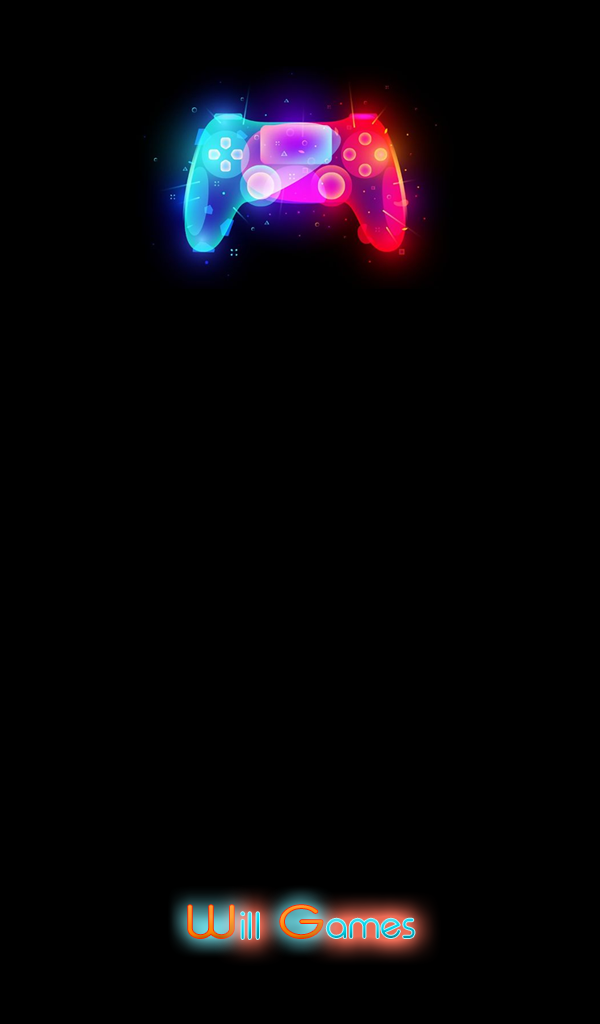
<style>
.page{position:relative;width:600px;height:1024px;background:#000000}
.page>*{position:absolute;margin:0}
.t1{font:46.5px "TypoRoundLightDemo";scale:1.29 1}
.t2{font:38px "TypoRoundLightDemo"}
</style>
<div class="page">
<p class="t1" style="left:188px;top:905px;width:46px;height:33px">W</p>
<p class="t1" style="left:280px;top:905px;width:43px;height:33px">G</p>
<p class="t2" style="left:241px;top:912px;width:18px;height:27px">ill</p>
<p class="t2" style="left:326px;top:918px;width:89px;height:20px">ames</p>
</div>
